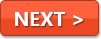
<style>
.page{position:relative;width:101px;height:39px;background:#ff613d}
.page>*{position:absolute;margin:0}
.t1{font:20px "SegoeUI-Bold";color:#ffffff}
</style>
<div class="page">
<p class="t1" style="left:15px;top:12px;width:68px;height:14px">NEXT &gt;</p>
</div>
